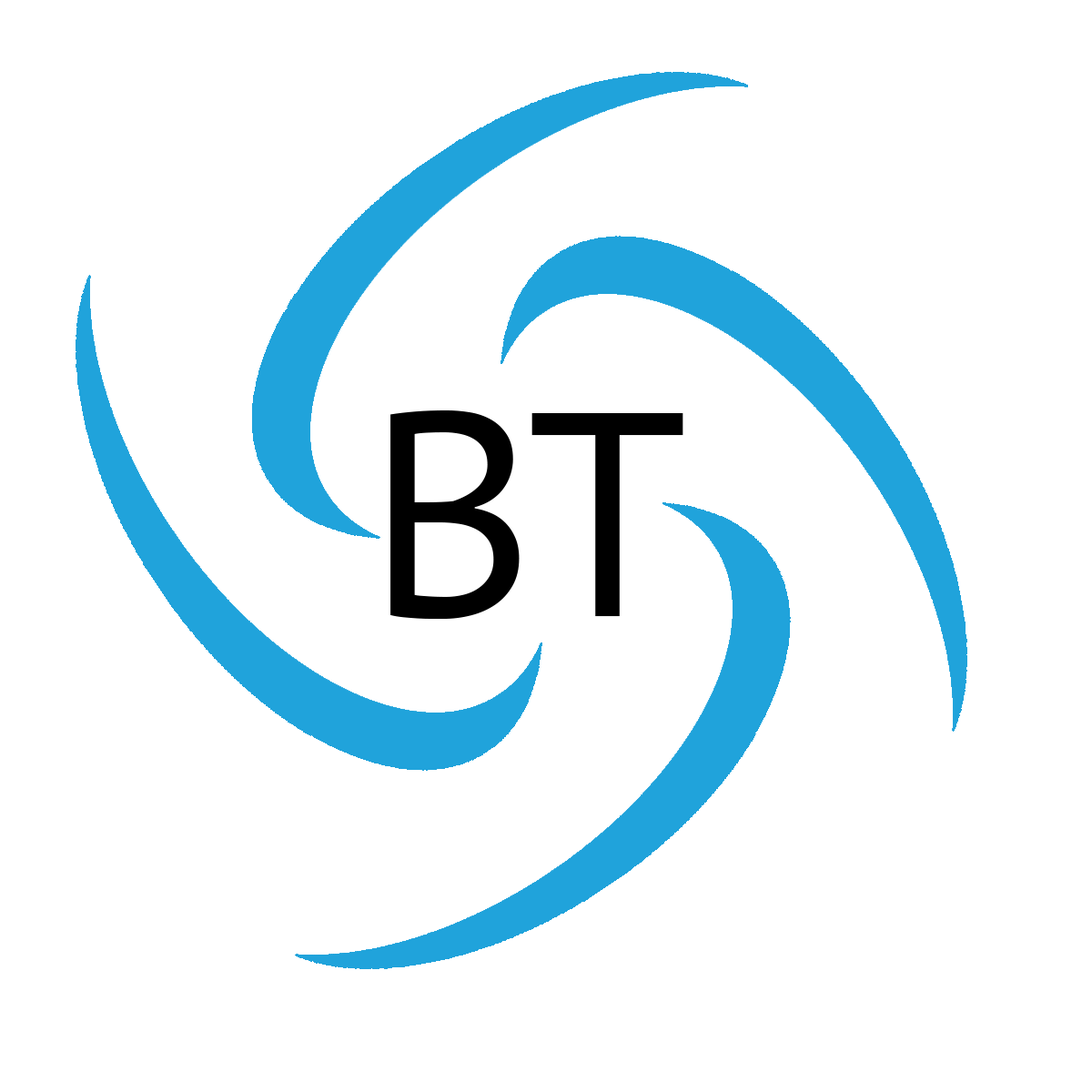
<style>
.page{position:relative;width:1092px;height:1092px;background:#ffffff}
.page>*{position:absolute;margin:0}
.t1{font:290.7px "PTSans-Regular";color:#000000}
</style>
<div class="page">
<p class="t1" style="left:390px;top:410px;width:293px;height:209px">BT</p>
</div>
